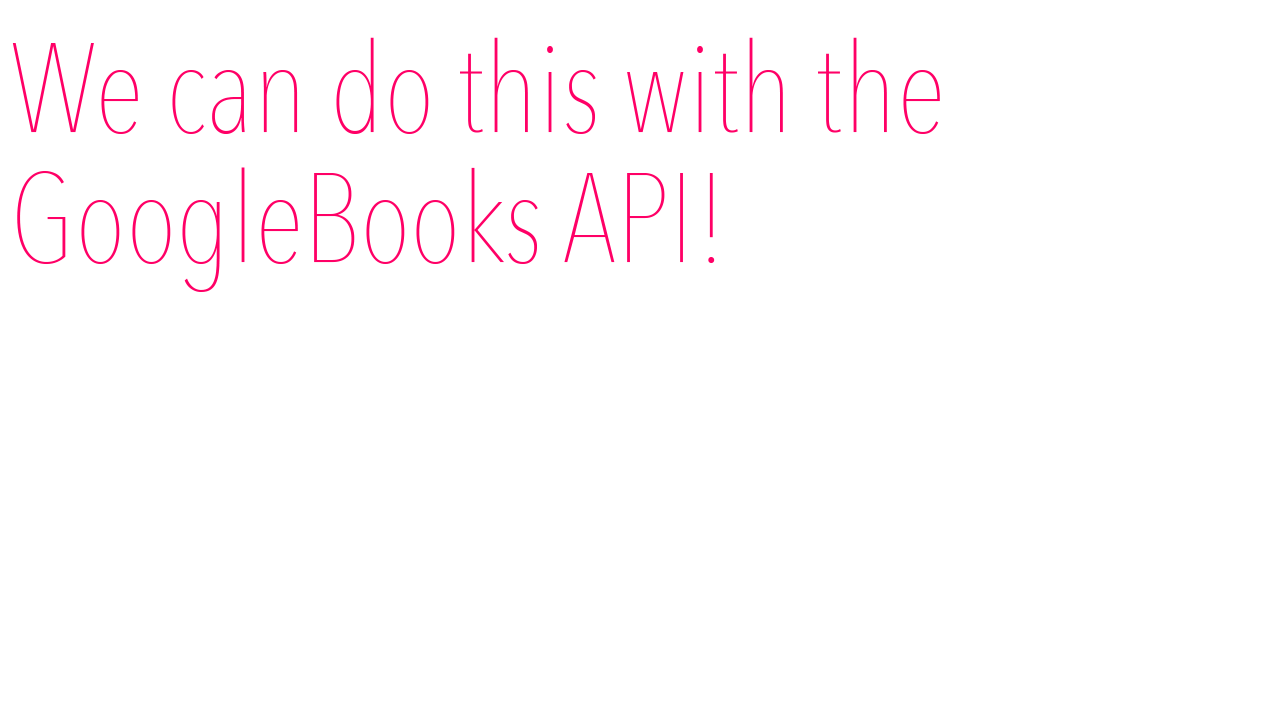
<style>
.page{position:relative;width:1280px;height:720px;background:#ffffff}
.page>*{position:absolute;margin:0}
.t1{font:125px "AvenirNextCondensed-UltraLight";color:#ff0066}
</style>
<div class="page">
<p class="t1" style="left:12px;top:37px;width:928px;height:255px">We can do this with the <br>GoogleBooks API!</p>
</div>
